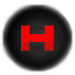
<style>
.page{position:relative;width:75px;height:75px;background:#ffffff}
.page>*{position:absolute;margin:0}
.t1{font:35.2px "Coalition";color:#ff0000}
</style>
<div class="page">
<p class="t1" style="left:21px;top:25px;width:33px;height:26px">H</p>
</div>
